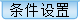
<style>
.page{position:relative;width:80px;height:20px}
.page>*{position:absolute;margin:0}
.t1{font:14px "SimSun";letter-spacing:0.1em;color:#000000}
</style>
<div class="page">
<p class="t1" style="left:10px;top:3px;width:59px;height:14px">条件设置</p>
</div>
